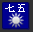
<style>
.page{position:relative;width:33px;height:32px;background:#000090}
.page>*{position:absolute;margin:0}
.t1{font:10.4px "SimSun";color:#ffffff}
</style>
<div class="page">
<p class="t1" style="left:5px;top:4px;width:20px;height:8px">七五</p>
</div>
